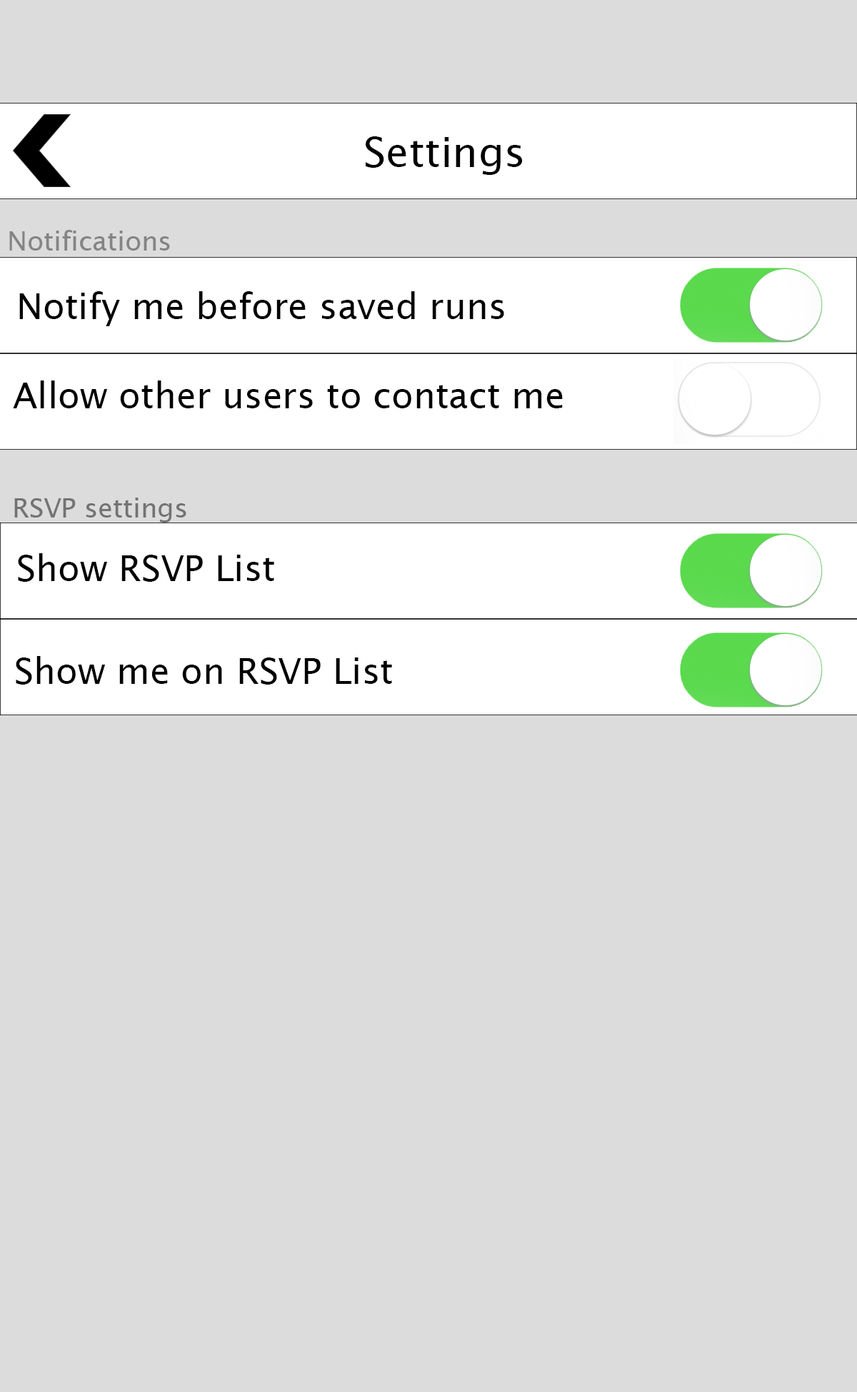
<style>
.page{position:relative;width:857px;height:1392px;background:#dcdcdc}
.page>*{position:absolute;margin:0}
.t1{font:41.6px "LucidaSans";color:#000000}
.t2{font:26.8px "LucidaSans";color:#848484}
.t3{font:8.6px "LucidaSans";color:#000000}
.t4{font:26.8px "LucidaSans";color:#737373}
.t5{font:35.7px "LucidaSans";color:#000000}
</style>
<div class="page">
<p class="t1" style="left:365px;top:136px;width:158px;height:39px">Settings</p>
<p class="t2" style="left:9px;top:230px;width:161px;height:21px">Notifications</p>
<p class="t3" style="left:19px;top:291px;width:485px;height:35px">Notify me before saved runs</p>
<p class="t3" style="left:13px;top:380px;width:550px;height:28px">Allow other users to contact me</p>
<p class="t4" style="left:14px;top:498px;width:172px;height:25px">RSVP settings</p>
<p class="t5" style="left:18px;top:553px;width:256px;height:29px">Show RSVP List</p>
<p class="t3" style="left:16px;top:656px;width:376px;height:29px">Show me on RSVP List</p>
</div>
